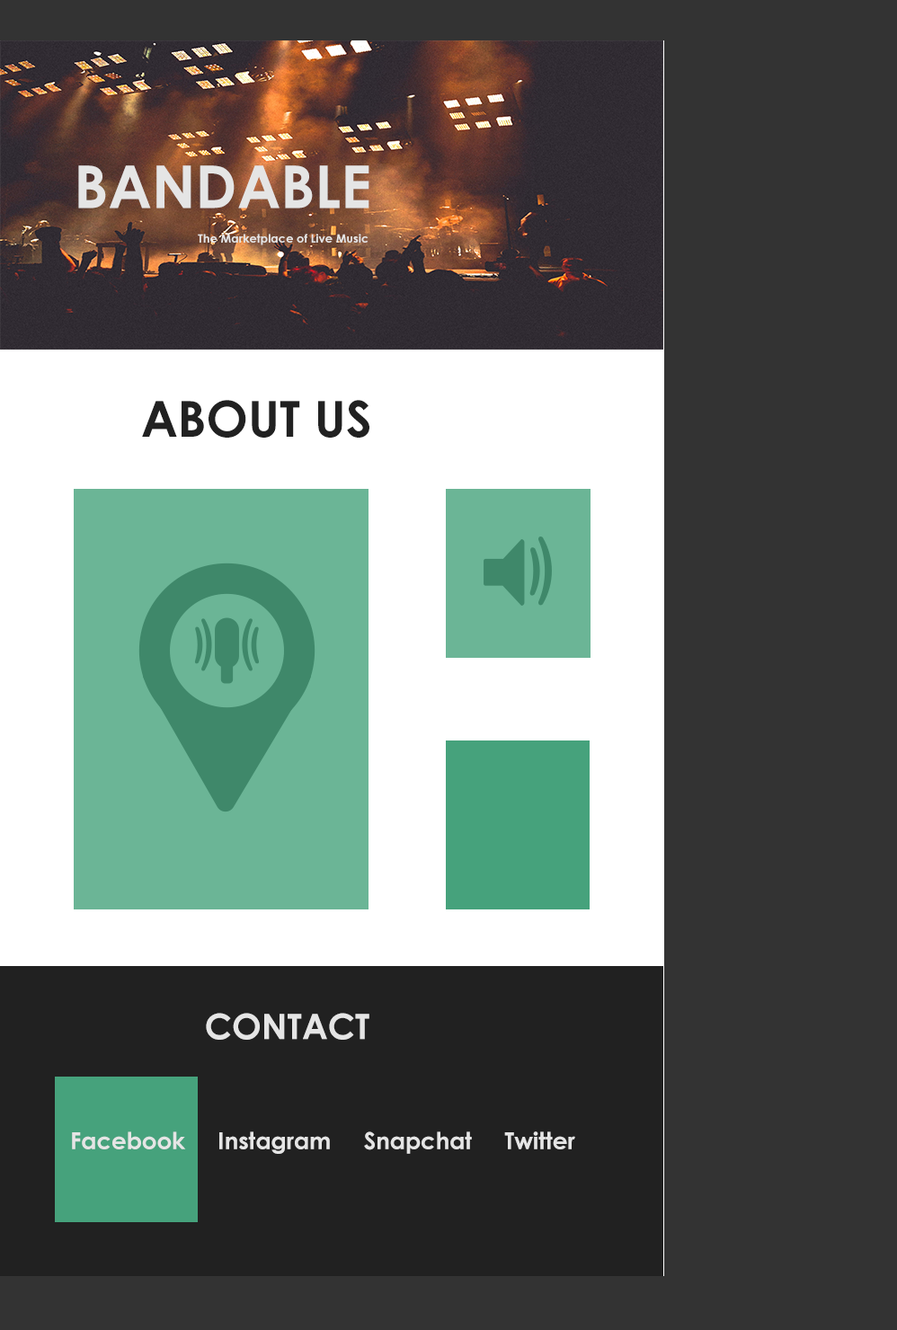
<style>
.page{position:relative;width:897px;height:1330px;background:#333333}
.page>*{position:absolute;margin:0}
.t1{font:59.1px "CenturyGothic-Bold";color:#e5e5e5}
.t2{font:11.7px "CenturyGothic-Bold";color:#e5e5e5}
.t3{font:49.5px "CenturyGothic-Bold";color:#212121}
.t4{font:35px "CenturyGothic-Bold";color:#e5e5e5}
.t5{font:23.3px "CenturyGothic-Bold";color:#e5e5e5}
</style>
<div class="page">
<p class="t1" style="left:78px;top:165px;width:291px;height:43px">BANDABLE</p>
<p class="t2" style="left:198px;top:234px;width:170px;height:11px">The Marketplace of Live Music</p>
<p class="t3" style="left:142px;top:400px;width:227px;height:38px">ABOUT US</p>
<p class="t4" style="left:206px;top:1013px;width:163px;height:27px">CONTACT</p>
<p class="t5" style="left:72px;top:1131px;width:503px;height:23px">Facebook     Instagram     Snapchat     Twitter</p>
</div>
